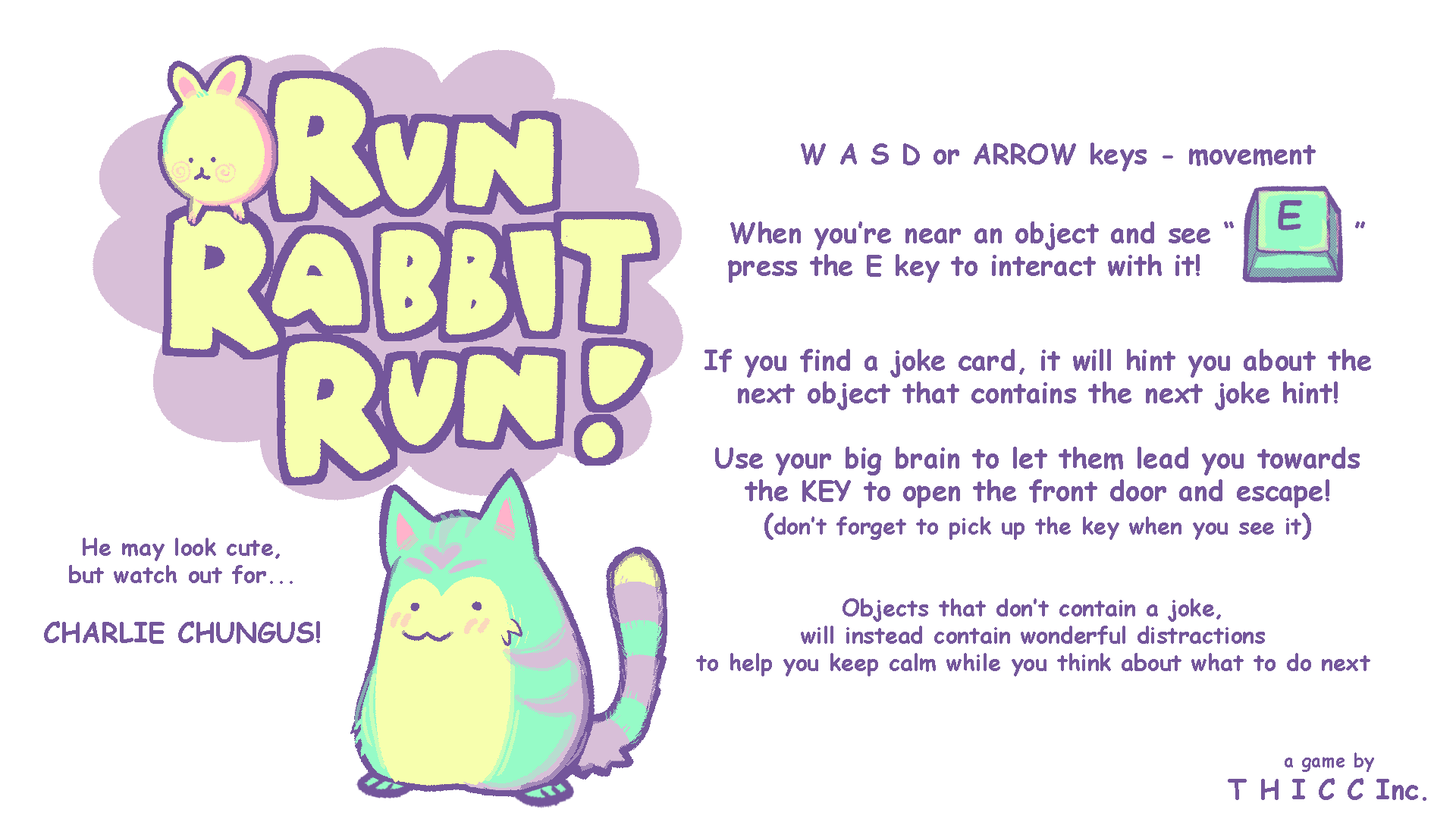
<style>
.page{position:relative;width:1456px;height:819px;background:#ffffff}
.page>*{position:absolute;margin:0}
.t1{font:27.3px "ComicSansMS-Bold";color:#74569b}
.t2{font:22.7px "ComicSansMS-Bold";color:#74569b}
.t3{font:18.2px "ComicSansMS-Bold";color:#74569b}
</style>
<div class="page">
<p class="t1" style="left:801px;top:143px;width:515px;height:28px">W A S D or ARROW keys - movement</p>
<p class="t1" style="left:728px;top:221px;width:637px;height:62px">When you’re near an object and see “          ”<br>press the E key to interact with it!</p>
<p class="t1" style="left:704px;top:349px;width:667px;height:191px;text-align:center">If you find a joke card, it will hint you about the<br>next object that contains the next joke hint!<br><br>Use your big brain to let them lead you towards<br>the KEY to open the front door and escape!<br>(<span class="t2">don’t forget to pick up the key when you see it</span>)</p>
<p class="t2" style="left:44px;top:538px;width:276px;height:106px;text-align:center">He may look cute,<br>but watch out for...<br><br><span class="t1">CHARLIE CHUNGUS!</span></p>
<p class="t2" style="left:696px;top:598px;width:674px;height:78px;text-align:center">Objects that don’t contain a joke,<br>will instead contain wonderful distractions<br>to help you keep calm while you think about what to do next</p>
<p class="t1" style="left:1228px;top:752px;width:198px;height:49px;text-align:center"><span class="t3">a game by<br></span>T H I C C Inc.</p>
</div>
